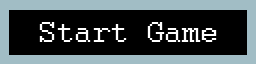
<style>
.page{position:relative;width:256px;height:64px;background:#000000}
.page>*{position:absolute;margin:0}
.t1{font:32px "Courier";color:#ffffff}
</style>
<div class="page">
<p class="t1" style="left:39px;top:22px;width:178px;height:20px">Start Game</p>
</div>
